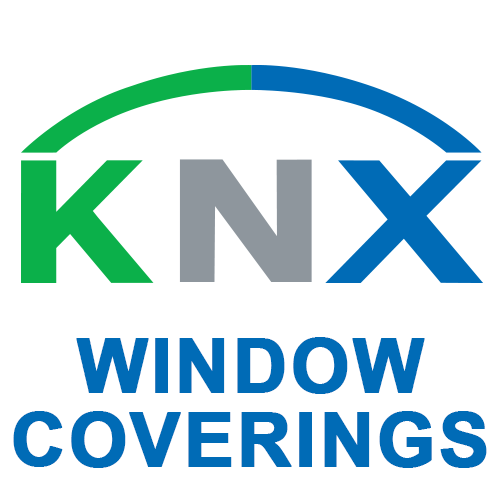
<style>
.page{position:relative;width:500px;height:500px;background:#ffffff}
.page>*{position:absolute;margin:0}
.t1{font:75px/74px "Arial-BoldMT";letter-spacing:0.02em;color:#006bb6;text-transform:uppercase;font-weight:bold}
</style>
<div class="page">
<p class="t1" style="left:13px;top:337px;width:474px;height:131px;text-align:center">WINDOW<br>COVERINGS</p>
</div>
